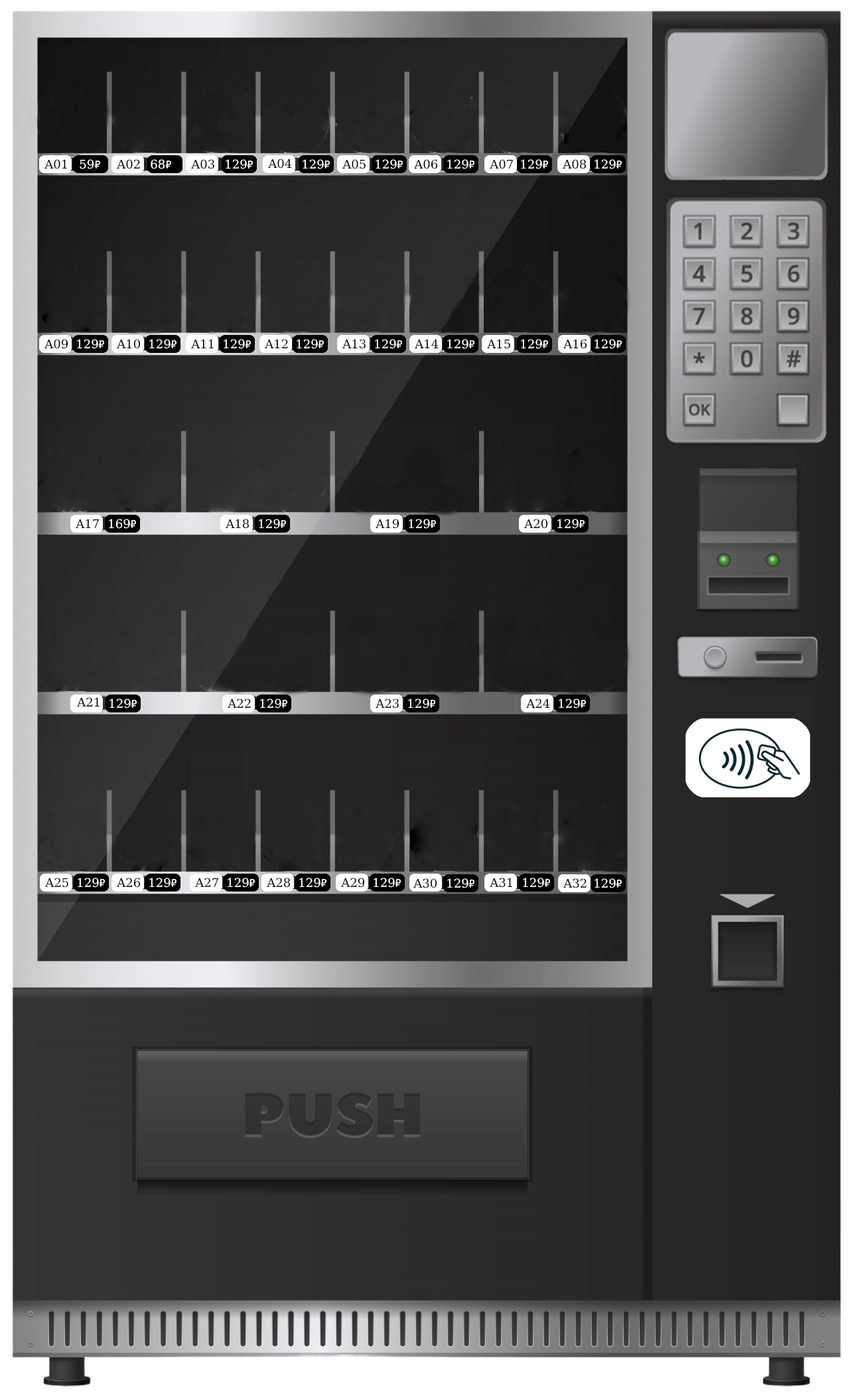
<style>
.page{position:relative;width:854px;height:1397px}
.page>*{position:absolute;margin:0}
.t1{font:11.9px "DejaVuMathTeXGyre-Regular";color:#000000}
.t2{font:11.9px "DejaVuMathTeXGyre-Regular";color:#ffffff}
.t3{font:11.9px "MyriadPro-Regular";color:#ffffff}
</style>
<div class="page">
<p class="t1" style="left:44px;top:159px;width:23px;height:10px">A01</p>
<p class="t2" style="left:80px;top:159px;width:20px;height:10px">59<span class="t3">₽</span></p>
<p class="t1" style="left:117px;top:159px;width:23px;height:10px">A02</p>
<p class="t2" style="left:151px;top:159px;width:20px;height:10px">68<span class="t3">₽</span></p>
<p class="t1" style="left:191px;top:159px;width:23px;height:10px">A03</p>
<p class="t2" style="left:226px;top:159px;width:27px;height:10px">129<span class="t3">₽</span></p>
<p class="t1" style="left:268px;top:159px;width:24px;height:9px">A04</p>
<p class="t2" style="left:302px;top:159px;width:28px;height:10px">129<span class="t3">₽</span></p>
<p class="t1" style="left:342px;top:159px;width:23px;height:10px">A05</p>
<p class="t2" style="left:375px;top:159px;width:28px;height:10px">129<span class="t3">₽</span></p>
<p class="t1" style="left:414px;top:159px;width:24px;height:10px">A06</p>
<p class="t2" style="left:447px;top:159px;width:27px;height:10px">129<span class="t3">₽</span></p>
<p class="t1" style="left:490px;top:159px;width:23px;height:10px">A07</p>
<p class="t2" style="left:521px;top:159px;width:27px;height:10px">129<span class="t3">₽</span></p>
<p class="t1" style="left:562px;top:159px;width:24px;height:10px">A08</p>
<p class="t2" style="left:594px;top:159px;width:27px;height:10px">129<span class="t3">₽</span></p>
<p class="t1" style="left:44px;top:339px;width:24px;height:10px">A09</p>
<p class="t2" style="left:77px;top:339px;width:27px;height:10px">129<span class="t3">₽</span></p>
<p class="t1" style="left:117px;top:339px;width:24px;height:10px">A10</p>
<p class="t2" style="left:149px;top:339px;width:27px;height:10px">129<span class="t3">₽</span></p>
<p class="t1" style="left:191px;top:339px;width:23px;height:10px">A11</p>
<p class="t2" style="left:224px;top:339px;width:27px;height:10px">129<span class="t3">₽</span></p>
<p class="t1" style="left:265px;top:339px;width:23px;height:10px">A12</p>
<p class="t2" style="left:296px;top:339px;width:28px;height:10px">129<span class="t3">₽</span></p>
<p class="t1" style="left:342px;top:339px;width:23px;height:10px">A13</p>
<p class="t2" style="left:375px;top:339px;width:27px;height:10px">129<span class="t3">₽</span></p>
<p class="t1" style="left:415px;top:339px;width:23px;height:10px">A14</p>
<p class="t2" style="left:447px;top:339px;width:27px;height:10px">129<span class="t3">₽</span></p>
<p class="t1" style="left:487px;top:339px;width:23px;height:10px">A15</p>
<p class="t2" style="left:521px;top:339px;width:27px;height:10px">129<span class="t3">₽</span></p>
<p class="t1" style="left:563px;top:339px;width:24px;height:10px">A16</p>
<p class="t2" style="left:594px;top:339px;width:27px;height:10px">129<span class="t3">₽</span></p>
<p class="t1" style="left:76px;top:519px;width:23px;height:10px">A17</p>
<p class="t2" style="left:109px;top:519px;width:27px;height:10px">169<span class="t3">₽</span></p>
<p class="t1" style="left:226px;top:519px;width:23px;height:10px">A18</p>
<p class="t2" style="left:259px;top:519px;width:27px;height:10px">129<span class="t3">₽</span></p>
<p class="t1" style="left:375px;top:519px;width:24px;height:10px">A19</p>
<p class="t2" style="left:409px;top:519px;width:27px;height:10px">129<span class="t3">₽</span></p>
<p class="t1" style="left:524px;top:519px;width:24px;height:10px">A20</p>
<p class="t2" style="left:557px;top:519px;width:27px;height:10px">129<span class="t3">₽</span></p>
<p class="t1" style="left:77px;top:697px;width:22px;height:10px">A21</p>
<p class="t2" style="left:109px;top:698px;width:28px;height:10px">129<span class="t3">₽</span></p>
<p class="t1" style="left:228px;top:698px;width:23px;height:10px">A22</p>
<p class="t2" style="left:260px;top:698px;width:27px;height:10px">129<span class="t3">₽</span></p>
<p class="t1" style="left:375px;top:698px;width:24px;height:10px">A23</p>
<p class="t2" style="left:408px;top:698px;width:27px;height:10px">129<span class="t3">₽</span></p>
<p class="t1" style="left:526px;top:698px;width:24px;height:10px">A24</p>
<p class="t2" style="left:558px;top:698px;width:28px;height:10px">129<span class="t3">₽</span></p>
<p class="t1" style="left:45px;top:878px;width:23px;height:9px">A25</p>
<p class="t2" style="left:78px;top:878px;width:27px;height:9px">129<span class="t3">₽</span></p>
<p class="t1" style="left:117px;top:878px;width:24px;height:9px">A26</p>
<p class="t2" style="left:149px;top:878px;width:27px;height:9px">129<span class="t3">₽</span></p>
<p class="t1" style="left:195px;top:878px;width:23px;height:9px">A27</p>
<p class="t2" style="left:228px;top:878px;width:27px;height:9px">129<span class="t3">₽</span></p>
<p class="t1" style="left:267px;top:878px;width:24px;height:9px">A28</p>
<p class="t2" style="left:299px;top:878px;width:27px;height:9px">129<span class="t3">₽</span></p>
<p class="t1" style="left:341px;top:878px;width:24px;height:9px">A29</p>
<p class="t2" style="left:373px;top:878px;width:28px;height:9px">129<span class="t3">₽</span></p>
<p class="t1" style="left:413px;top:878px;width:24px;height:10px">A30</p>
<p class="t2" style="left:447px;top:878px;width:27px;height:10px">129<span class="t3">₽</span></p>
<p class="t1" style="left:490px;top:878px;width:22px;height:9px">A31</p>
<p class="t2" style="left:523px;top:878px;width:27px;height:9px">129<span class="t3">₽</span></p>
<p class="t1" style="left:563px;top:878px;width:23px;height:10px">A32</p>
<p class="t2" style="left:594px;top:878px;width:27px;height:10px">129<span class="t3">₽</span></p>
</div>
